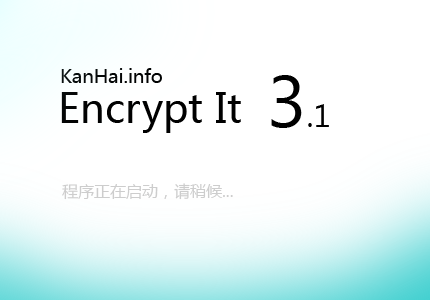
<style>
.page{position:relative;width:430px;height:300px;background:#ffffff}
.page>*{position:absolute;margin:0}
.t1{font:18.7px "MicrosoftYaHei";color:#000000}
.t2{font:32px "MicrosoftNewTaiLue";color:#000000}
.t3{font:73.3px "MicrosoftNewTaiLue";color:#000000}
.t4{font:40px "MicrosoftYaHei";color:#000000}
.t5{font:16px "MicrosoftYaHei";color:#cdcdcd}
</style>
<div class="page">
<p class="t1" style="left:61px;top:68px;width:101px;height:15px">KanHai.info</p>
<p class="t2" style="left:271px;top:75px;width:58px;height:53px"><span class="t3">3</span>.1</p>
<p class="t4" style="left:61px;top:92px;width:180px;height:41px">Encrypt It</p>
<p class="t5" style="left:62px;top:183px;width:171px;height:17px">程序正在启动，请稍候...</p>
</div>
